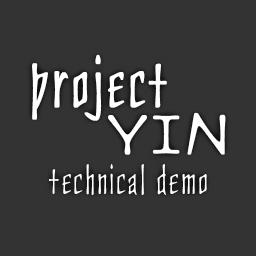
<style>
.page{position:relative;width:256px;height:256px;background:#333333}
.page>*{position:absolute;margin:0}
.t1{font:56.9px "CultStd";letter-spacing:0.05em;color:#ffffff;font-weight:bold}
.t2{font:32.6px "CultStd";letter-spacing:0.05em;color:#ffffff;scale:1.04 1}
</style>
<div class="page">
<p class="t1" style="left:32px;top:54px;width:135px;height:67px">project</p>
<p class="t1" style="left:108px;top:112px;width:118px;height:43px">YIN</p>
<p class="t2" style="left:49px;top:164px;width:158px;height:31px">technical demo</p>
</div>
